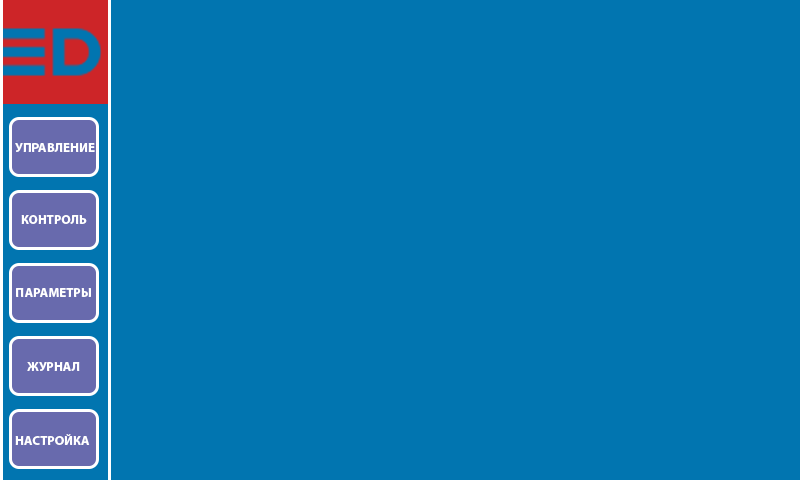
<style>
.page{position:relative;width:800px;height:480px;background:#0175b0}
.page>*{position:absolute;margin:0}
.t1{font:13px "MyriadPro-Bold";color:#ffffff}
</style>
<div class="page">
<p class="t1" style="left:15px;top:143px;width:80px;height:9px">УПРАВЛЕНИЕ</p>
<p class="t1" style="left:21px;top:215px;width:66px;height:9px">КОНТРОЛЬ</p>
<p class="t1" style="left:16px;top:288px;width:75px;height:9px">ПАРАМЕТРЫ</p>
<p class="t1" style="left:27px;top:362px;width:53px;height:9px">ЖУРНАЛ</p>
<p class="t1" style="left:15px;top:434px;width:75px;height:11px">НАСТРОЙКА</p>
</div>
